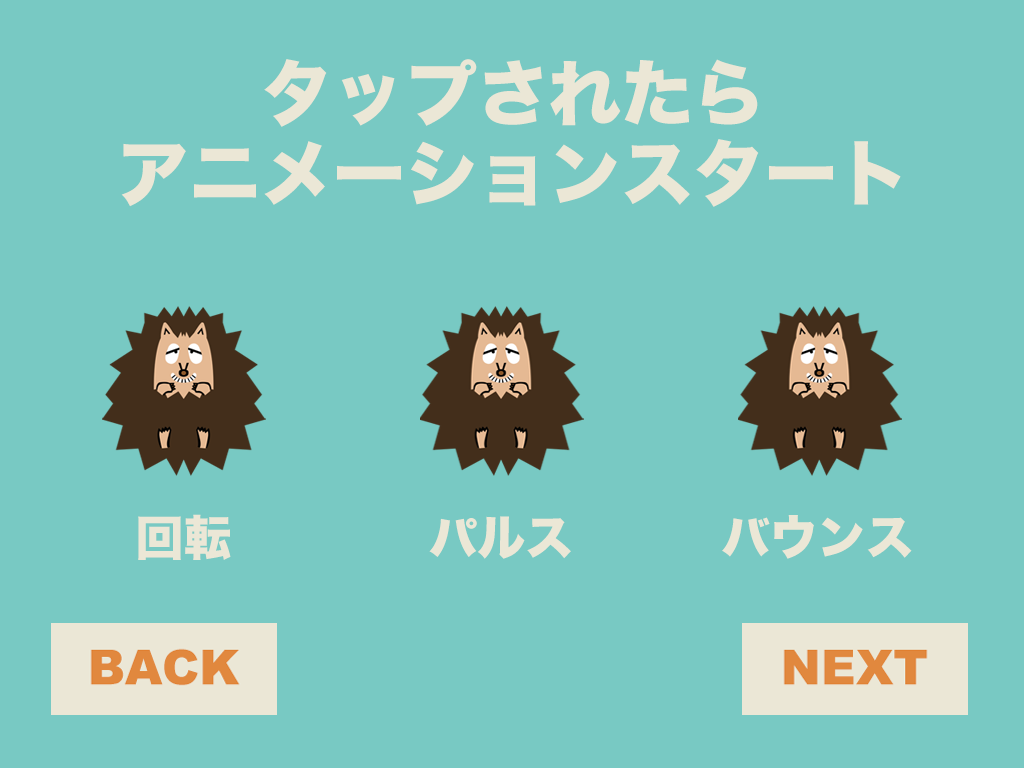
<style>
.page{position:relative;width:1024px;height:768px;background:#78c9c3}
.page>*{position:absolute;margin:0}
.t1{font:72px/80px "HiraKakuStd-W8";color:#ebe7d6}
.t2{font:48px "HiraKakuStd-W8";color:#ebe7d6}
</style>
<div class="page">
<p class="t1" style="left:121px;top:59px;width:780px;height:148px;text-align:center">タップされたら<br>アニメーションスタート</p>
<p class="t2" style="left:138px;top:514px;width:93px;height:46px">回転</p>
<p class="t2" style="left:429px;top:516px;width:142px;height:43px">パルス</p>
<p class="t2" style="left:722px;top:515px;width:190px;height:44px">バウンス</p>
</div>
